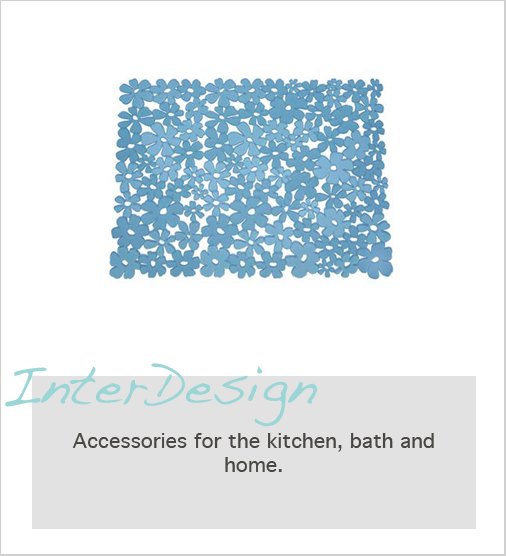
<style>
.page{position:relative;width:506px;height:556px;background:#ffffff}
.page>*{position:absolute;margin:0}
.t1{font:56px "Handwriting-Dakota";color:#9bd5d5}
.t2{font:20px "Geneva";color:#484743}
</style>
<div class="page">
<p class="t1" style="left:5px;top:363px;width:312px;height:64px">InterDesign</p>
<p class="t2" style="left:72px;top:433px;width:362px;height:39px;text-align:center">Accessories for the kitchen, bath and home.</p>
</div>
